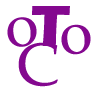
<style>
.page{position:relative;width:98px;height:91px;background:#ffffff}
.page>*{position:absolute;margin:0}
.t1{font:60px "ErasITC-Bold";color:#84088f}
.t2{font:60px "PalatinoLinotype-Roman";color:#84088f}
</style>
<div class="page">
<p class="t1" style="left:32px;top:6px;width:38px;height:40px">T</p>
<p class="t2" style="left:7px;top:17px;width:30px;height:30px">o</p>
<p class="t2" style="left:61px;top:24px;width:30px;height:31px">o</p>
<p class="t2" style="left:18px;top:42px;width:40px;height:45px">C</p>
</div>
